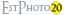
<style>
.page{position:relative;width:64px;height:15px;background:#ffffff}
.page>*{position:absolute;margin:0}
.t1{font:12.3px "TrajanPro-Regular";color:#86a1b6}
.t2{font:8.2px "TrajanPro-Regular";color:#86a1b6}
.t3{font:16.4px "TrajanPro-Regular";color:#86a1b6}
</style>
<div class="page">
<p class="t1" style="left:1px;top:1px;width:8px;height:13px">E</p>
<p class="t2" style="left:8px;top:5px;width:11px;height:6px">st</p>
<p class="t3" style="left:18px;top:1px;width:8px;height:13px">P</p>
<p class="t2" style="left:26px;top:5px;width:24px;height:6px">hoto</p>
</div>
